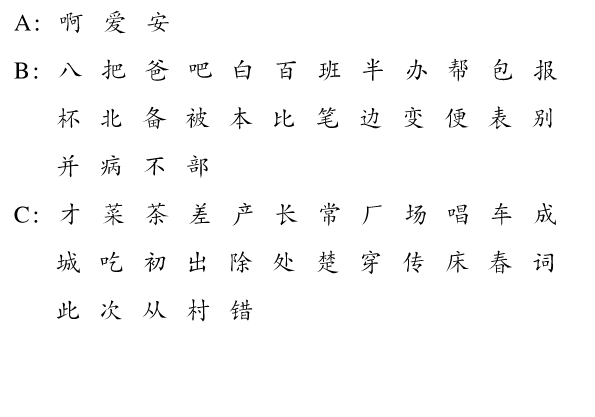
<style>
.page{position:relative;width:595px;height:417px;background:#ffffff}
.page>*{position:absolute;margin:0}
.t1{font:24px/48px "CTKaiTiSJ";letter-spacing:0.1em;color:#000000}
</style>
<div class="page">
<p class="t1" style="left:14px;top:10px;width:544px;height:312px">A:  啊  爱  安<br>B:  八  把  爸  吧  白  百  班  半  办  帮  包  报  <br>     杯  北  备  被  本  比  笔  边  变  便  表  别  <br>     并  病  不  部<br>C:  才  菜  茶  差  产  长  常  厂  场  唱  车  成  <br>     城  吃  初  出  除  处  楚  穿  传  床  春  词  <br>     此  次  从  村  错</p>
</div>
